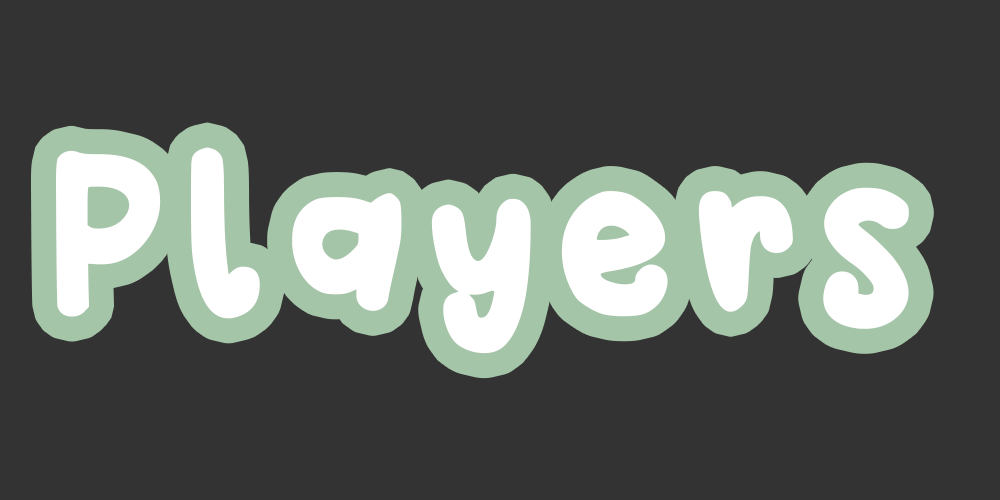
<style>
.page{position:relative;width:1000px;height:500px;background:#333333}
.page>*{position:absolute;margin:0}
.t1{font:300px "Winkle-Regular";color:#ffffff}
</style>
<div class="page">
<p class="t1" style="left:56px;top:147px;width:853px;height:207px">Players</p>
</div>
